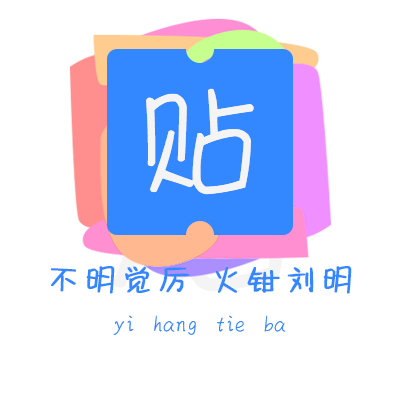
<style>
.page{position:relative;width:400px;height:400px;background:#ffffff}
.page>*{position:absolute;margin:0}
.t1{font:150px "MDT_1_95969";color:#f4f4f4}
.t2{font:36px "MDT_1_95969";color:#3388ff;font-weight:bold}
.t3{font:24px "MDT_1_95969";color:#3388ff}
</style>
<div class="page">
<p class="t1" style="left:146px;top:88px;width:108px;height:107px">贴</p>
<p class="t2" style="left:51px;top:266px;width:301px;height:28px">不明觉厉 火钳刘明</p>
<p class="t3" style="left:113px;top:315px;width:173px;height:20px">yi  hang  tie  ba</p>
</div>
